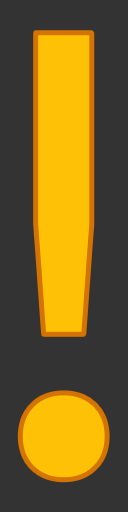
<style>
.page{position:relative;width:128px;height:512px;background:#333333}
.page>*{position:absolute;margin:0}
.t1{font:666.7px "WorkSans-Regular";color:#ffc105}
</style>
<div class="page">
<p class="t1" style="left:20px;top:32px;width:88px;height:448px">!</p>
</div>
